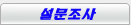
<style>
.page{position:relative;width:131px;height:25px}
.page>*{position:absolute;margin:0}
.t1{font:24px "(ÇÑ)¹®È­¹æ¼Û";color:#1106f8;text-transform:uppercase;font-style:italic}
</style>
<div class="page">
<p class="t1" style="left:40px;top:8px;width:56px;height:12px">설문조사</p>
</div>
